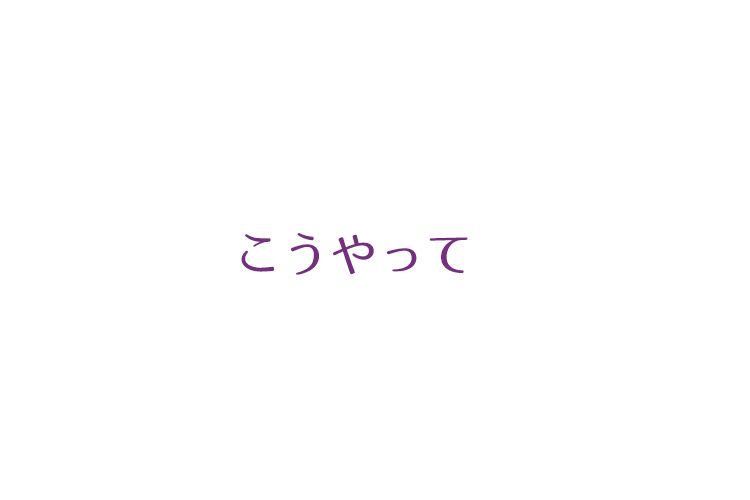
<style>
.page{position:relative;width:750px;height:500px;background:#ffffff}
.page>*{position:absolute;margin:0}
.t1{font:48px "07LogoTypeGothic7";color:#752e80}
</style>
<div class="page">
<p class="t1" style="left:241px;top:233px;width:227px;height:42px">こうやって</p>
</div>
